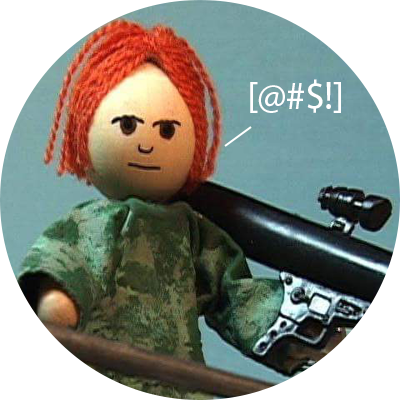
<style>
.page{position:relative;width:400px;height:400px;background:#ffffff}
.page>*{position:absolute;margin:0}
.t1{font:40px "MyriadPro-Regular";color:#ffffff}
</style>
<div class="page">
<p class="t1" style="left:250px;top:79px;width:91px;height:34px">[@#$!]</p>
</div>
